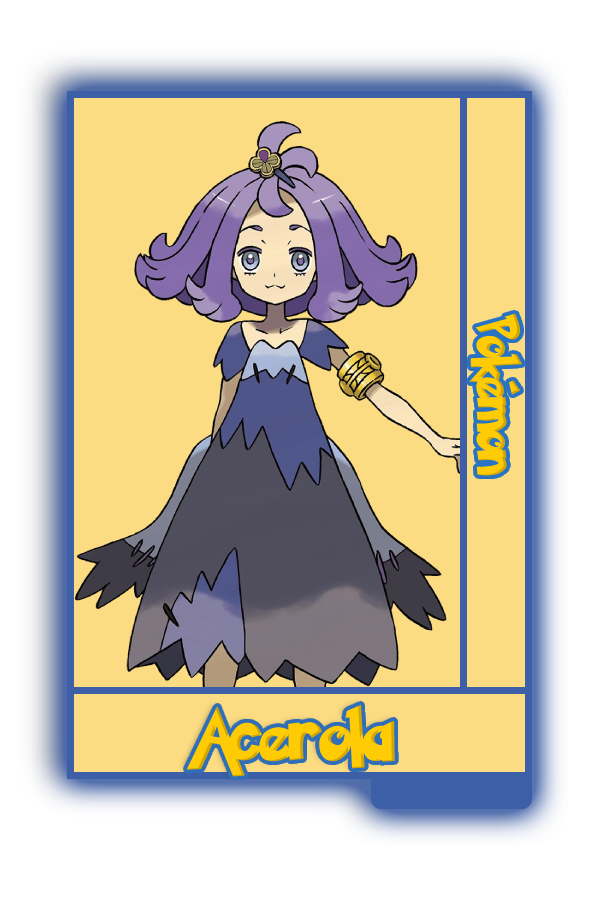
<style>
.page{position:relative;width:600px;height:900px;background:#fbdc83}
.page>*{position:absolute;margin:0}
.t1{font:48.8px "PokemonSolidNormal";color:#ffcb05;scale:0.8 1}
.t2{font:60.1px "PokemonSolidNormal";color:#ffcb05;scale:0.96 1}
</style>
<div class="page">
<p class="t1" style="left:469px;top:313px;width:54px;height:163px;rotate:90deg">Pokémon</p>
<p class="t2" style="left:186px;top:704px;width:209px;height:73px">Acerola</p>
</div>
